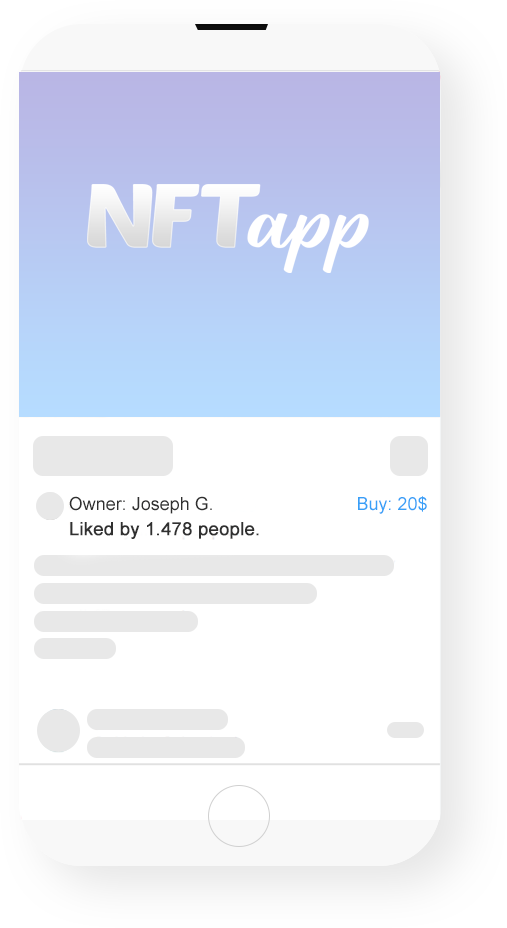
<style>
.page{position:relative;width:507px;height:928px;background:#ffffff}
.page>*{position:absolute;margin:0}
.t1{font:18px "ArialMT";color:#303030}
.t2{font:18px "ArialMT";color:#389ff7}
.t3{font:18px "ArialMT";color:#303030;font-weight:bold}
</style>
<div class="page">
<p class="t1" style="left:69px;top:496px;width:143px;height:18px">Owner: Joseph G.</p>
<p class="t2" style="left:358px;top:496px;width:69px;height:18px">Buy: 20$</p>
<p class="t3" style="left:70px;top:522px;width:189px;height:17px">Liked by 1.478 people.</p>
</div>
